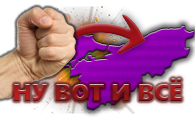
<style>
.page{position:relative;width:195px;height:120px;background:#ffffff}
.page>*{position:absolute;margin:0}
.t1{font:24px "SegoeUIBlack"}
</style>
<div class="page">
<p class="t1" style="left:14px;top:78px;width:168px;height:23px">НУ ВОТ И ВСЁ</p>
</div>
